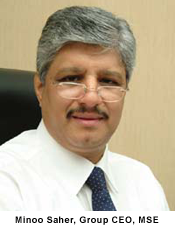
<style>
.page{position:relative;width:175px;height:228px}
.page>*{position:absolute;margin:0}
.t1{font:9px "Arial-BoldMT";letter-spacing:0.05em;color:#000000}
</style>
<div class="page">
<p class="t1" style="left:15px;top:216px;width:144px;height:9px">Minoo Saher, Group CEO, MSE</p>
</div>
